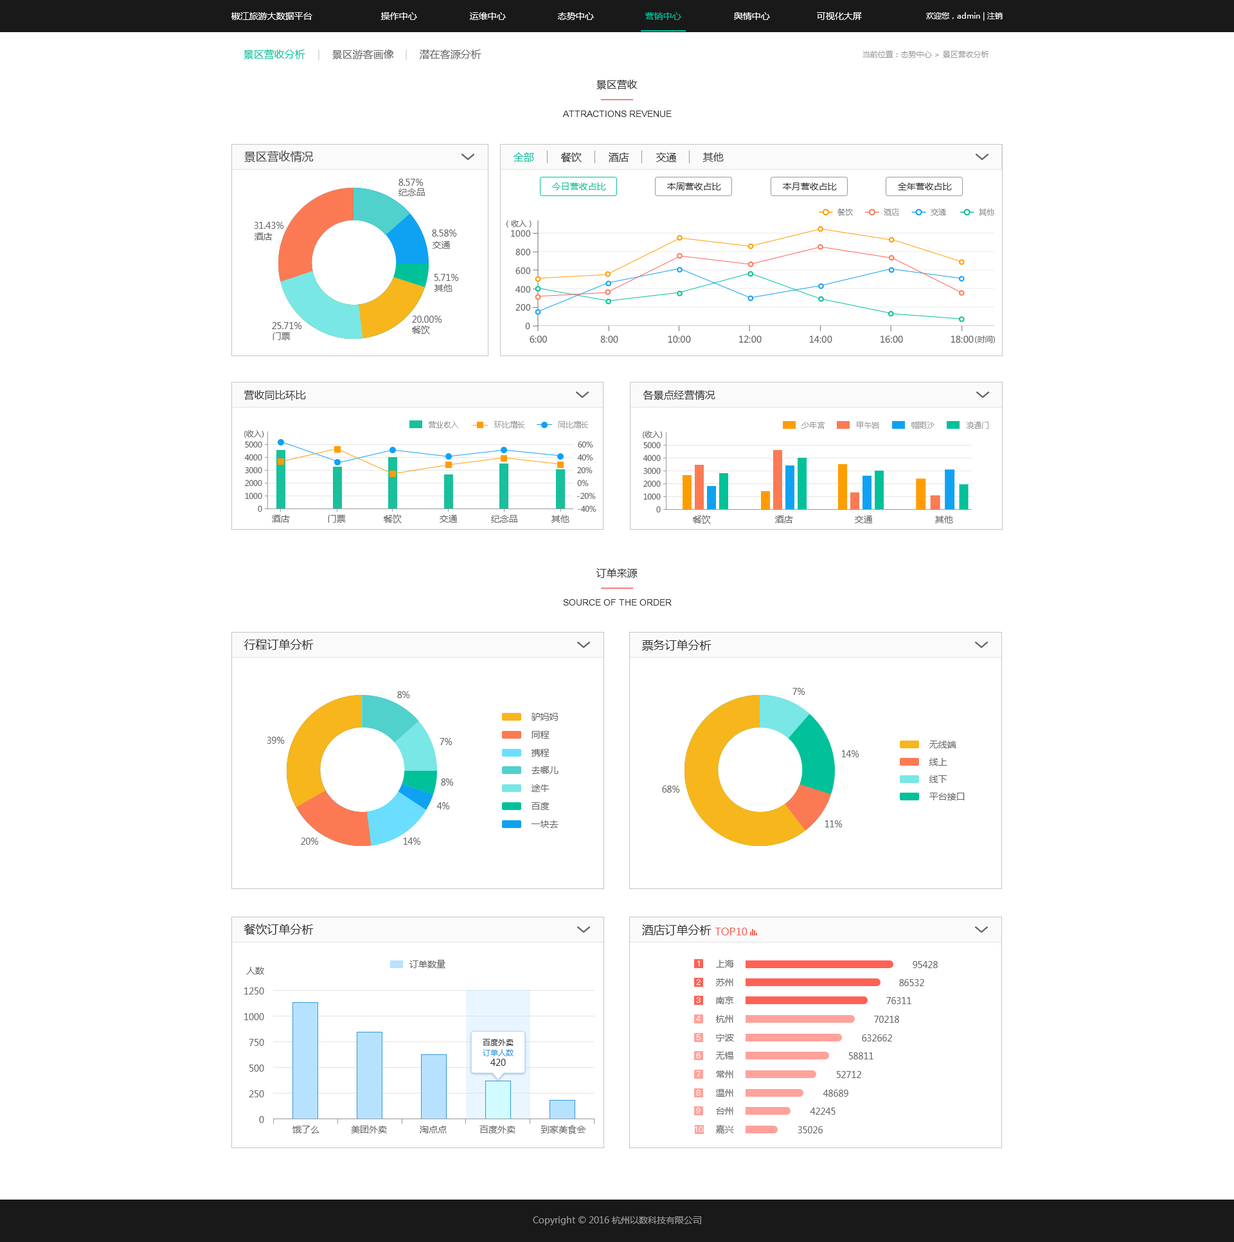
<style>
.page{position:relative;width:1234px;height:1242px;background:#ffffff}
.page>*{position:absolute;margin:0}
.t1{font:9px "MicrosoftYaHei";color:#ffffff}
.t2{font:9px "MicrosoftYaHei";color:#00c199}
.t3{font:7.7px "MicrosoftYaHei";color:#ffffff}
.t4{font:10.3px "MicrosoftYaHei";color:#00c199}
.t5{font:10.3px "MicrosoftYaHei";color:#666666}
.t6{font:7.7px "MicrosoftYaHei";color:#999999}
.t7{font:10.3px "MicrosoftYaHei";color:#333333}
.t8{font:9px "ArialMT";color:#333333;text-transform:uppercase}
.t9{font:11.6px "MicrosoftYaHei";color:#434343}
.t10{font:9px "MicrosoftYaHei";color:#666666}
.t11{font:9px "MicrosoftYaHei";color:#333333}
.t12{font:7.7px "MicrosoftYaHei";color:#666666}
.t13{font:8.3px "MicrosoftYaHei";color:#666666}
.t14{font:11.6px "MicrosoftYaHei";color:#333333}
.t15{font:10.3px "MicrosoftYaHei";color:#fa635a}
.t16{font:7.7px "PingFang-SC-Medium";color:#fefefe}
.t17{font:7.7px/10.3px "MicrosoftYaHei";color:#333333}
.t18{font:7.7px/10.3px "MicrosoftYaHei";color:#3298dc}
.t19{font:9px/10.3px "MicrosoftYaHei";color:#333333}
.t20{font:9px "MicrosoftYaHei";color:#999999}
</style>
<div class="page">
<p class="t1" style="left:231px;top:12px;width:81px;height:8px">椒江旅游大数据平台</p>
<p class="t1" style="left:381px;top:12px;width:36px;height:8px">操作中心</p>
<p class="t1" style="left:470px;top:12px;width:36px;height:8px">运维中心</p>
<p class="t1" style="left:558px;top:12px;width:36px;height:8px">态势中心</p>
<p class="t2" style="left:645px;top:12px;width:36px;height:8px">营销中心</p>
<p class="t1" style="left:734px;top:12px;width:36px;height:8px">舆情中心</p>
<p class="t1" style="left:817px;top:12px;width:45px;height:8px">可视化大屏</p>
<p class="t3" style="left:926px;top:12px;width:77px;height:9px">欢迎您，admin | 注销</p>
<p class="t4" style="left:244px;top:50px;width:61px;height:9px">景区营收分析</p>
<p class="t5" style="left:332px;top:50px;width:62px;height:9px">景区游客画像</p>
<p class="t5" style="left:420px;top:50px;width:62px;height:9px">潜在客源分析</p>
<p class="t6" style="left:863px;top:51px;width:126px;height:7px">当前位置：态势中心 &gt; 景区营收分析</p>
<p class="t7" style="left:597px;top:80px;width:41px;height:9px">景区营收</p>
<p class="t8" style="left:562px;top:111px;width:110px;height:6px">Attractions revenue</p>
<p class="t9" style="left:244px;top:150px;width:70px;height:12px">景区营收情况</p>
<p class="t4" style="left:514px;top:152px;width:20px;height:10px">全部</p>
<p class="t7" style="left:561px;top:152px;width:21px;height:10px">餐饮</p>
<p class="t7" style="left:609px;top:152px;width:20px;height:10px">酒店</p>
<p class="t7" style="left:656px;top:152px;width:21px;height:10px">交通</p>
<p class="t7" style="left:703px;top:152px;width:21px;height:10px">其他</p>
<p class="t10" style="left:399px;top:179px;width:25px;height:7px">8.57%</p>
<p class="t2" style="left:552px;top:183px;width:54px;height:7px">今日营收占比</p>
<p class="t11" style="left:667px;top:183px;width:54px;height:7px">本周营收占比</p>
<p class="t11" style="left:783px;top:183px;width:54px;height:7px">本月营收占比</p>
<p class="t11" style="left:898px;top:183px;width:54px;height:7px">全年营收占比</p>
<p class="t10" style="left:399px;top:188px;width:26px;height:8px">纪念品</p>
<p class="t6" style="left:838px;top:208px;width:15px;height:8px">餐饮</p>
<p class="t6" style="left:884px;top:208px;width:15px;height:8px">酒店</p>
<p class="t6" style="left:931px;top:208px;width:15px;height:8px">交通</p>
<p class="t6" style="left:979px;top:208px;width:16px;height:8px">其他</p>
<p class="t10" style="left:254px;top:222px;width:30px;height:7px">31.43%</p>
<p class="t12" style="left:506px;top:219px;width:26px;height:9px">（收入）</p>
<p class="t10" style="left:255px;top:233px;width:18px;height:7px">酒店</p>
<p class="t10" style="left:432px;top:230px;width:25px;height:7px">8.58%</p>
<p class="t13" style="left:511px;top:230px;width:20px;height:7px">1000</p>
<p class="t10" style="left:433px;top:241px;width:18px;height:8px">交通</p>
<p class="t13" style="left:516px;top:248px;width:15px;height:8px">800</p>
<p class="t13" style="left:516px;top:267px;width:15px;height:7px">600</p>
<p class="t10" style="left:434px;top:274px;width:25px;height:7px">5.71%</p>
<p class="t10" style="left:435px;top:284px;width:18px;height:8px">其他</p>
<p class="t13" style="left:515px;top:285px;width:16px;height:8px">400</p>
<p class="t13" style="left:516px;top:303px;width:15px;height:8px">200</p>
<p class="t10" style="left:412px;top:316px;width:30px;height:7px">20.00%</p>
<p class="t10" style="left:272px;top:322px;width:30px;height:7px">25.71%</p>
<p class="t10" style="left:412px;top:325px;width:18px;height:9px">餐饮</p>
<p class="t13" style="left:525px;top:322px;width:5px;height:8px">0</p>
<p class="t10" style="left:273px;top:332px;width:18px;height:8px">门票</p>
<p class="t10" style="left:530px;top:336px;width:17px;height:7px">6:00</p>
<p class="t10" style="left:600px;top:336px;width:18px;height:7px">8:00</p>
<p class="t10" style="left:668px;top:336px;width:23px;height:7px">10:00</p>
<p class="t10" style="left:739px;top:336px;width:23px;height:7px">12:00</p>
<p class="t10" style="left:809px;top:336px;width:24px;height:7px">14:00</p>
<p class="t10" style="left:881px;top:336px;width:22px;height:7px">16:00</p>
<p class="t10" style="left:951px;top:336px;width:23px;height:7px">18:00</p>
<p class="t12" style="left:975px;top:335px;width:21px;height:9px">(时间)</p>
<p class="t7" style="left:244px;top:390px;width:62px;height:11px">营收同比环比</p>
<p class="t7" style="left:643px;top:390px;width:73px;height:10px">各景点经营情况</p>
<p class="t6" style="left:429px;top:421px;width:29px;height:7px">营业收入</p>
<p class="t6" style="left:494px;top:421px;width:31px;height:7px">环比增长</p>
<p class="t6" style="left:559px;top:421px;width:29px;height:7px">同比增长</p>
<p class="t6" style="left:802px;top:422px;width:23px;height:7px">少年宫</p>
<p class="t6" style="left:857px;top:422px;width:22px;height:7px">甲午岩</p>
<p class="t6" style="left:912px;top:422px;width:23px;height:7px">帽雨沙</p>
<p class="t6" style="left:967px;top:422px;width:22px;height:7px">浪通门</p>
<p class="t12" style="left:244px;top:429px;width:20px;height:9px">(收入)</p>
<p class="t12" style="left:643px;top:430px;width:20px;height:9px">(收入)</p>
<p class="t12" style="left:245px;top:441px;width:17px;height:7px">5000</p>
<p class="t12" style="left:578px;top:441px;width:15px;height:7px">60%</p>
<p class="t12" style="left:644px;top:442px;width:17px;height:7px">5000</p>
<p class="t12" style="left:244px;top:454px;width:18px;height:7px">4000</p>
<p class="t12" style="left:577px;top:454px;width:16px;height:7px">40%</p>
<p class="t12" style="left:643px;top:455px;width:18px;height:7px">4000</p>
<p class="t12" style="left:245px;top:467px;width:17px;height:7px">3000</p>
<p class="t12" style="left:577px;top:467px;width:16px;height:7px">20%</p>
<p class="t12" style="left:644px;top:467px;width:17px;height:7px">3000</p>
<p class="t12" style="left:245px;top:480px;width:17px;height:7px">2000</p>
<p class="t12" style="left:577px;top:480px;width:12px;height:7px">0%</p>
<p class="t12" style="left:644px;top:480px;width:17px;height:7px">2000</p>
<p class="t12" style="left:245px;top:492px;width:17px;height:8px">1000</p>
<p class="t12" style="left:577px;top:492px;width:19px;height:8px">-20%</p>
<p class="t12" style="left:644px;top:493px;width:17px;height:7px">1000</p>
<p class="t12" style="left:258px;top:505px;width:4px;height:7px">0</p>
<p class="t12" style="left:578px;top:505px;width:19px;height:7px">-40%</p>
<p class="t12" style="left:656px;top:506px;width:5px;height:7px">0</p>
<p class="t10" style="left:272px;top:515px;width:18px;height:8px">酒店</p>
<p class="t10" style="left:328px;top:515px;width:18px;height:8px">门票</p>
<p class="t10" style="left:384px;top:514px;width:18px;height:9px">餐饮</p>
<p class="t10" style="left:440px;top:515px;width:18px;height:8px">交通</p>
<p class="t10" style="left:491px;top:515px;width:27px;height:8px">纪念品</p>
<p class="t10" style="left:552px;top:515px;width:18px;height:8px">其他</p>
<p class="t10" style="left:693px;top:515px;width:18px;height:9px">餐饮</p>
<p class="t10" style="left:775px;top:516px;width:18px;height:7px">酒店</p>
<p class="t10" style="left:855px;top:516px;width:18px;height:7px">交通</p>
<p class="t10" style="left:935px;top:516px;width:18px;height:7px">其他</p>
<p class="t7" style="left:596px;top:568px;width:42px;height:10px">订单来源</p>
<p class="t8" style="left:563px;top:599px;width:109px;height:7px">Source of the order</p>
<p class="t14" style="left:244px;top:639px;width:70px;height:11px">行程订单分析</p>
<p class="t14" style="left:642px;top:640px;width:70px;height:11px">票务订单分析</p>
<p class="t10" style="left:793px;top:688px;width:13px;height:7px">7%</p>
<p class="t10" style="left:397px;top:691px;width:13px;height:7px">8%</p>
<p class="t10" style="left:532px;top:713px;width:26px;height:8px">驴妈妈</p>
<p class="t10" style="left:267px;top:737px;width:18px;height:7px">39%</p>
<p class="t10" style="left:532px;top:731px;width:18px;height:8px">同程</p>
<p class="t10" style="left:440px;top:738px;width:13px;height:7px">7%</p>
<p class="t10" style="left:532px;top:749px;width:18px;height:8px">携程</p>
<p class="t10" style="left:930px;top:741px;width:27px;height:7px">无线端</p>
<p class="t10" style="left:842px;top:750px;width:18px;height:7px">14%</p>
<p class="t10" style="left:930px;top:758px;width:18px;height:8px">线上</p>
<p class="t10" style="left:532px;top:766px;width:27px;height:8px">去哪儿</p>
<p class="t10" style="left:441px;top:779px;width:13px;height:7px">8%</p>
<p class="t10" style="left:532px;top:784px;width:18px;height:8px">途牛</p>
<p class="t10" style="left:662px;top:786px;width:18px;height:7px">68%</p>
<p class="t10" style="left:930px;top:775px;width:18px;height:8px">线下</p>
<p class="t10" style="left:930px;top:793px;width:35px;height:7px">平台接口</p>
<p class="t10" style="left:437px;top:802px;width:13px;height:7px">4%</p>
<p class="t10" style="left:532px;top:802px;width:18px;height:8px">百度</p>
<p class="t10" style="left:531px;top:820px;width:28px;height:8px">一块去</p>
<p class="t10" style="left:825px;top:820px;width:18px;height:7px">11%</p>
<p class="t10" style="left:301px;top:838px;width:18px;height:7px">20%</p>
<p class="t10" style="left:403px;top:838px;width:18px;height:7px">14%</p>
<p class="t14" style="left:244px;top:924px;width:70px;height:11px">餐饮订单分析</p>
<p class="t14" style="left:642px;top:924px;width:70px;height:11px">酒店订单分析</p>
<p class="t15" style="left:716px;top:928px;width:32px;height:7px">TOP10</p>
<p class="t10" style="left:410px;top:960px;width:36px;height:8px">订单数量</p>
<p class="t16" style="left:698px;top:960px;width:2px;height:6px">1</p>
<p class="t10" style="left:716px;top:960px;width:18px;height:8px">上海</p>
<p class="t10" style="left:913px;top:961px;width:25px;height:7px">95428</p>
<p class="t10" style="left:246px;top:967px;width:18px;height:8px">人数</p>
<p class="t10" style="left:244px;top:987px;width:20px;height:8px">1250</p>
<p class="t16" style="left:696px;top:979px;width:5px;height:6px">2</p>
<p class="t10" style="left:716px;top:978px;width:18px;height:8px">苏州</p>
<p class="t10" style="left:899px;top:979px;width:25px;height:7px">86532</p>
<p class="t16" style="left:696px;top:997px;width:5px;height:6px">3</p>
<p class="t10" style="left:716px;top:996px;width:18px;height:8px">南京</p>
<p class="t10" style="left:887px;top:997px;width:25px;height:7px">76311</p>
<p class="t10" style="left:244px;top:1013px;width:20px;height:7px">1000</p>
<p class="t16" style="left:696px;top:1016px;width:5px;height:6px">4</p>
<p class="t10" style="left:716px;top:1015px;width:18px;height:8px">杭州</p>
<p class="t10" style="left:874px;top:1016px;width:25px;height:7px">70218</p>
<p class="t16" style="left:696px;top:1034px;width:5px;height:6px">5</p>
<p class="t10" style="left:716px;top:1034px;width:18px;height:7px">宁波</p>
<p class="t10" style="left:862px;top:1034px;width:30px;height:7px">632662</p>
<p class="t10" style="left:249px;top:1039px;width:15px;height:7px">750</p>
<p class="t17" style="left:483px;top:1039px;width:31px;height:27px;text-align:center">百度外卖<br><span class="t18">订单人数<br></span><span class="t19">420</span></p>
<p class="t16" style="left:696px;top:1052px;width:5px;height:6px">6</p>
<p class="t10" style="left:716px;top:1052px;width:18px;height:7px">无锡</p>
<p class="t10" style="left:849px;top:1052px;width:25px;height:7px">58811</p>
<p class="t10" style="left:249px;top:1065px;width:15px;height:7px">500</p>
<p class="t16" style="left:696px;top:1071px;width:5px;height:6px">7</p>
<p class="t10" style="left:716px;top:1070px;width:18px;height:8px">常州</p>
<p class="t10" style="left:836px;top:1071px;width:25px;height:7px">52712</p>
<p class="t10" style="left:249px;top:1090px;width:15px;height:7px">250</p>
<p class="t16" style="left:696px;top:1090px;width:5px;height:5px">8</p>
<p class="t10" style="left:716px;top:1089px;width:18px;height:8px">温州</p>
<p class="t10" style="left:823px;top:1090px;width:26px;height:7px">48689</p>
<p class="t16" style="left:696px;top:1108px;width:5px;height:5px">9</p>
<p class="t10" style="left:716px;top:1107px;width:18px;height:8px">台州</p>
<p class="t10" style="left:810px;top:1108px;width:26px;height:7px">42245</p>
<p class="t10" style="left:259px;top:1116px;width:5px;height:7px">0</p>
<p class="t10" style="left:292px;top:1126px;width:28px;height:7px">饿了么</p>
<p class="t10" style="left:351px;top:1126px;width:36px;height:7px">美团外卖</p>
<p class="t10" style="left:420px;top:1126px;width:27px;height:7px">淘点点</p>
<p class="t10" style="left:480px;top:1126px;width:36px;height:7px">百度外卖</p>
<p class="t10" style="left:541px;top:1125px;width:45px;height:9px">到家美食会</p>
<p class="t16" style="left:695px;top:1126px;width:8px;height:6px">10</p>
<p class="t10" style="left:716px;top:1125px;width:18px;height:8px">嘉兴</p>
<p class="t10" style="left:798px;top:1126px;width:25px;height:7px">35026</p>
<p class="t20" style="left:533px;top:1216px;width:168px;height:9px">Copyright © 2016 杭州以数科技有限公司</p>
</div>
